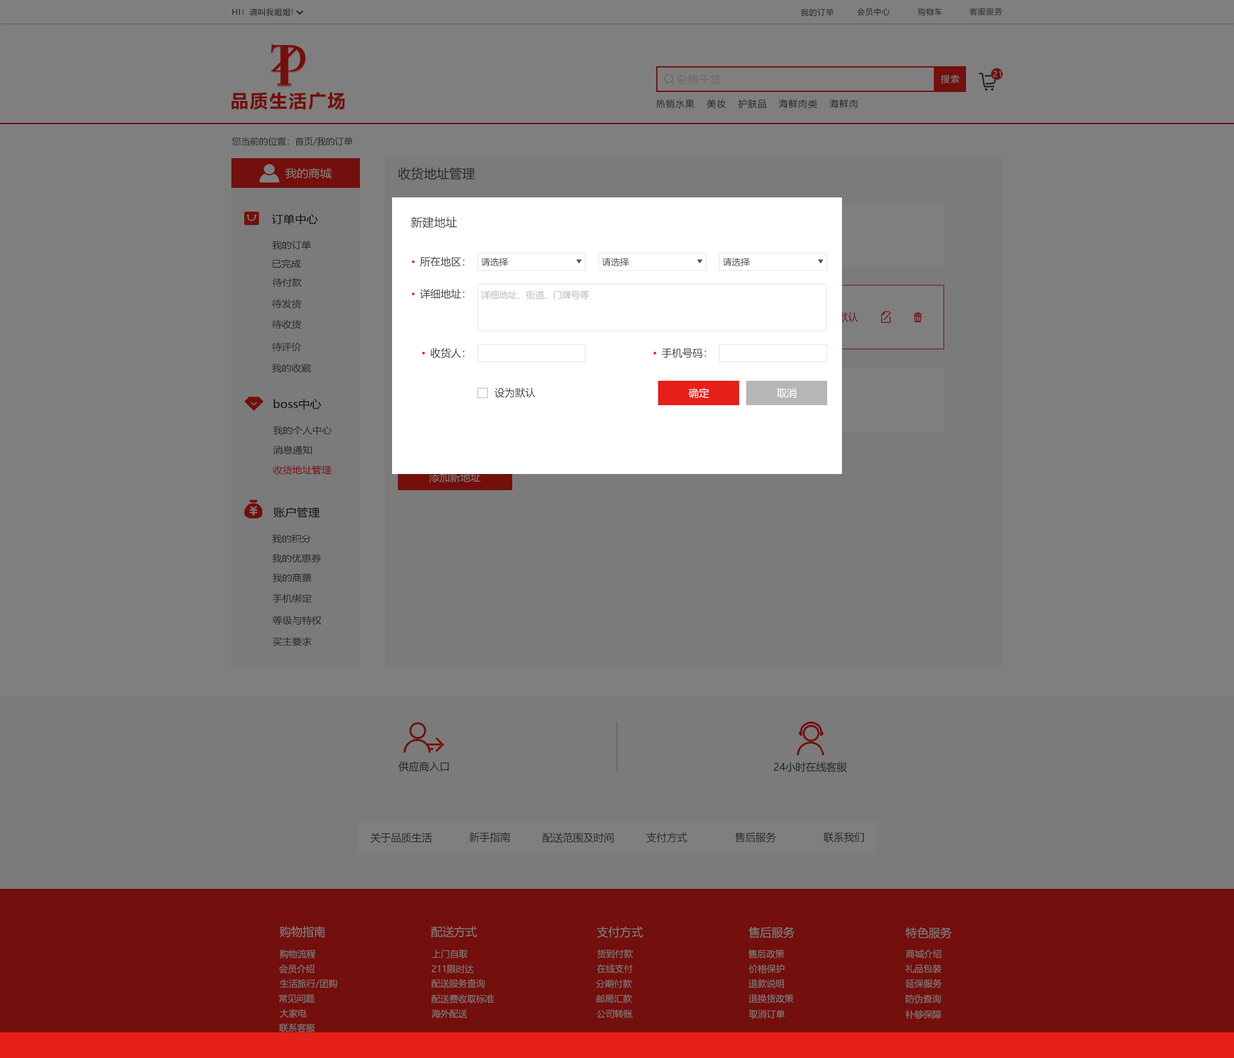
<style>
.page{position:relative;width:1234px;height:1058px;background:#7f7f7f}
.page>*{position:absolute;margin:0}
.t1{font:7.7px "MicrosoftYaHei";letter-spacing:0.08em;color:#202020}
.t2{font:7.7px "MicrosoftYaHei";letter-spacing:0.08em;color:#404040}
.t3{font:10.3px "MicrosoftYaHei";letter-spacing:0.08em;color:#6b6b6b}
.t4{font:9px "MicrosoftYaHei";letter-spacing:0.08em;color:#7f7f7f}
.t5{font:7.7px "MicrosoftYaHei";letter-spacing:0.08em;color:#7f7f7f}
.t6{font:18px "MicrosoftYaHei-Bold";letter-spacing:0.08em;color:#730f0c}
.t7{font:9px "MicrosoftYaHei";letter-spacing:0.08em;color:#202020}
.t8{font:9px "MicrosoftYaHei";color:#282828}
.t9{font:10.6px "MicrosoftYaHei";color:#7f7f7f;scale:1.09 1}
.t10{font:12.9px "MicrosoftYaHei";color:#282828}
.t11{font:10.6px "MicrosoftYaHei";color:#101010;scale:1.09 1}
.t12{font:11.6px "MicrosoftYaHei";color:#404040}
.t13{font:9px "MicrosoftYaHei";color:#242424;scale:1.09 1}
.t14{font:10.3px "MicrosoftYaHei";color:#404040}
.t15{font:9px "MicrosoftYaHei";color:#404040}
.t16{font:9px "MicrosoftYaHei";color:#b6b6b6}
.t17{font:10.3px "MicrosoftYaHei";color:#fffefe}
.t18{font:10.3px "MicrosoftYaHei";color:#ffffff}
.t19{font:9px "MicrosoftYaHei";color:#730f0c;scale:1.09 1}
.t20{font:10.3px "MicrosoftYaHei";color:#202020}
.t21{font:10.3px "MicrosoftYaHei";color:#282828}
.t22{font:11.6px "MicrosoftYaHei";color:#7f7f7f}
.t23{font:9px "MicrosoftYaHei";color:#7f7f7f}
</style>
<div class="page">
<p class="t1" style="left:232px;top:8px;width:61px;height:8px">HI！请叫我姐姐!</p>
<p class="t1" style="left:801px;top:8px;width:33px;height:8px">我的订单</p>
<p class="t1" style="left:857px;top:8px;width:33px;height:8px">会员中心</p>
<p class="t1" style="left:918px;top:8px;width:24px;height:8px">购物车</p>
<p class="t2" style="left:969px;top:8px;width:34px;height:7px">客服服务</p>
<p class="t3" style="left:677px;top:74px;width:44px;height:11px">杂粮干货</p>
<p class="t4" style="left:941px;top:75px;width:19px;height:9px">搜索</p>
<p class="t5" style="left:993px;top:71px;width:9px;height:6px">21</p>
<p class="t6" style="left:231px;top:92px;width:114px;height:18px">品质生活广场</p>
<p class="t7" style="left:656px;top:99px;width:39px;height:10px">热销水果</p>
<p class="t7" style="left:707px;top:99px;width:19px;height:9px">美妆</p>
<p class="t7" style="left:739px;top:99px;width:27px;height:10px">护肤品</p>
<p class="t7" style="left:779px;top:99px;width:39px;height:10px">海鲜肉类</p>
<p class="t7" style="left:829px;top:99px;width:29px;height:10px">海鲜肉</p>
<p class="t8" style="left:232px;top:137px;width:121px;height:9px">您当前的位置：首页/我的订单</p>
<p class="t9" style="left:285px;top:168px;width:47px;height:11px">我的商城</p>
<p class="t10" style="left:398px;top:167px;width:77px;height:13px">收货地址管理</p>
<p class="t11" style="left:271px;top:213px;width:47px;height:11px">订单中心</p>
<p class="t12" style="left:411px;top:217px;width:46px;height:11px">新建地址</p>
<p class="t13" style="left:272px;top:240px;width:39px;height:9px">我的订单</p>
<p class="t14" style="left:420px;top:256px;width:45px;height:11px">所在地区：</p>
<p class="t15" style="left:481px;top:257px;width:28px;height:9px">请选择</p>
<p class="t15" style="left:602px;top:257px;width:27px;height:9px">请选择</p>
<p class="t15" style="left:723px;top:257px;width:27px;height:9px">请选择</p>
<p class="t13" style="left:272px;top:259px;width:29px;height:9px">已完成</p>
<p class="t13" style="left:273px;top:278px;width:29px;height:9px">待付款</p>
<p class="t14" style="left:420px;top:289px;width:45px;height:10px">详细地址：</p>
<p class="t16" style="left:481px;top:290px;width:109px;height:10px">详细地址、街道、门牌号等</p>
<p class="t13" style="left:272px;top:299px;width:30px;height:10px">待发货</p>
<p class="t13" style="left:272px;top:320px;width:30px;height:9px">待收货</p>
<p class="t13" style="left:272px;top:342px;width:30px;height:10px">待评价</p>
<p class="t14" style="left:431px;top:348px;width:34px;height:10px">收货人：</p>
<p class="t14" style="left:662px;top:348px;width:44px;height:10px">手机号码：</p>
<p class="t13" style="left:272px;top:363px;width:39px;height:10px">我的收藏</p>
<p class="t14" style="left:494px;top:388px;width:42px;height:10px">设为默认</p>
<p class="t17" style="left:688px;top:388px;width:21px;height:10px">确定</p>
<p class="t18" style="left:777px;top:388px;width:20px;height:10px">取消</p>
<p class="t11" style="left:274px;top:399px;width:47px;height:11px">boss中心</p>
<p class="t13" style="left:273px;top:426px;width:59px;height:9px">我的个人中心</p>
<p class="t13" style="left:273px;top:446px;width:39px;height:9px">消息通知</p>
<p class="t19" style="left:273px;top:465px;width:59px;height:9px">收货地址管理</p>
<p class="t11" style="left:273px;top:507px;width:47px;height:11px">账户管理</p>
<p class="t13" style="left:272px;top:534px;width:40px;height:9px">我的积分</p>
<p class="t13" style="left:272px;top:554px;width:49px;height:8px">我的优惠券</p>
<p class="t13" style="left:273px;top:573px;width:39px;height:9px">我的商票</p>
<p class="t13" style="left:273px;top:593px;width:39px;height:10px">手机绑定</p>
<p class="t13" style="left:273px;top:615px;width:48px;height:10px">等级与特权</p>
<p class="t13" style="left:273px;top:636px;width:39px;height:10px">买主要求</p>
<p class="t20" style="left:399px;top:760px;width:50px;height:11px">供应商入口</p>
<p class="t20" style="left:774px;top:761px;width:73px;height:11px">24小时在线客服</p>
<p class="t21" style="left:370px;top:832px;width:62px;height:11px">关于品质生活</p>
<p class="t21" style="left:469px;top:831px;width:41px;height:11px">新手指南</p>
<p class="t21" style="left:543px;top:832px;width:71px;height:11px">配送范围及时间</p>
<p class="t21" style="left:646px;top:832px;width:42px;height:10px">支付方式</p>
<p class="t21" style="left:735px;top:832px;width:42px;height:10px">售后服务</p>
<p class="t21" style="left:824px;top:832px;width:40px;height:10px">联系我们</p>
<p class="t22" style="left:280px;top:926px;width:45px;height:11px">购物指南</p>
<p class="t22" style="left:431px;top:926px;width:46px;height:11px">配送方式</p>
<p class="t22" style="left:597px;top:926px;width:47px;height:11px">支付方式</p>
<p class="t22" style="left:748px;top:926px;width:47px;height:12px">售后服务</p>
<p class="t22" style="left:906px;top:926px;width:46px;height:13px">特色服务</p>
<p class="t23" style="left:280px;top:949px;width:36px;height:9px">购物流程</p>
<p class="t23" style="left:432px;top:949px;width:36px;height:9px">上门自取</p>
<p class="t23" style="left:597px;top:949px;width:36px;height:9px">货到付款</p>
<p class="t23" style="left:748px;top:949px;width:36px;height:9px">售后政策</p>
<p class="t23" style="left:906px;top:949px;width:36px;height:9px">商城介绍</p>
<p class="t23" style="left:279px;top:964px;width:35px;height:9px">会员介绍</p>
<p class="t23" style="left:431px;top:964px;width:43px;height:9px">211限时达</p>
<p class="t23" style="left:597px;top:964px;width:36px;height:9px">在线支付</p>
<p class="t23" style="left:749px;top:964px;width:36px;height:9px">价格保护</p>
<p class="t23" style="left:906px;top:964px;width:36px;height:9px">礼品包装</p>
<p class="t23" style="left:280px;top:978px;width:58px;height:9px">生活旅行/团购</p>
<p class="t23" style="left:431px;top:978px;width:54px;height:9px">配送服务查询</p>
<p class="t23" style="left:596px;top:978px;width:36px;height:10px">分期付款</p>
<p class="t23" style="left:749px;top:978px;width:35px;height:10px">退款说明</p>
<p class="t23" style="left:906px;top:978px;width:36px;height:9px">延保服务</p>
<p class="t23" style="left:279px;top:994px;width:36px;height:9px">常见问题</p>
<p class="t23" style="left:431px;top:994px;width:63px;height:9px">配送费收取标准</p>
<p class="t23" style="left:597px;top:994px;width:35px;height:9px">邮局汇款</p>
<p class="t23" style="left:749px;top:993px;width:45px;height:10px">退换货政策</p>
<p class="t23" style="left:906px;top:994px;width:35px;height:9px">防伪查询</p>
<p class="t23" style="left:280px;top:1008px;width:27px;height:10px">大家电</p>
<p class="t23" style="left:431px;top:1009px;width:36px;height:9px">海外配送</p>
<p class="t23" style="left:597px;top:1009px;width:36px;height:9px">公司转账</p>
<p class="t23" style="left:749px;top:1009px;width:36px;height:9px">取消订单</p>
<p class="t23" style="left:906px;top:1009px;width:36px;height:10px">补够保障</p>
<p class="t23" style="left:279px;top:1023px;width:36px;height:9px">联系客服</p>
</div>
